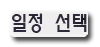
<style>
.page{position:relative;width:100px;height:47px;background:#ffffff}
.page>*{position:absolute;margin:0}
.t1{font:20px "MoeumTR-HM";color:#312839}
</style>
<div class="page">
<p class="t1" style="left:12px;top:13px;width:75px;height:20px">일정 선택</p>
</div>
